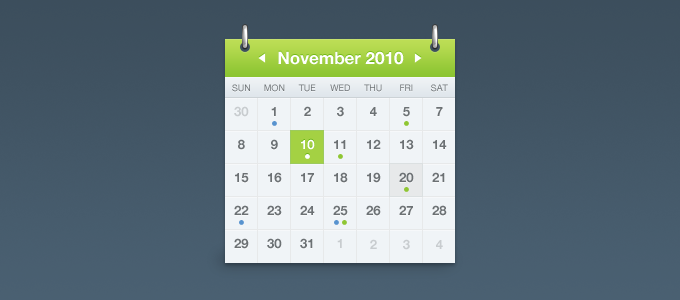
<style>
.page{position:relative;width:680px;height:300px}
.page>*{position:absolute;margin:0}
.t1{font:17px "HelveticaNeue-Bold";color:#ffffff}
.t2{font:9px "HelveticaNeue";color:#6c7174;text-transform:uppercase}
.t3{font:9px "HelveticaNeue";text-transform:uppercase}
.t4{font:13px "HelveticaNeue-Bold";color:#c8cccf}
.t5{font:13px "HelveticaNeue-Bold";color:#6c7174}
.t6{font:13px "HelveticaNeue-Bold";color:#ffffff}
</style>
<div class="page">
<p class="t1" style="left:278px;top:51px;width:126px;height:14px">November 2010</p>
<p class="t2" style="left:232px;top:84px;width:18px;height:8px">Sun</p>
<p class="t2" style="left:264px;top:84px;width:21px;height:8px">Mon</p>
<p class="t2" style="left:298px;top:84px;width:18px;height:8px">Tue</p>
<p class="t2" style="left:330px;top:84px;width:20px;height:7px">Wed</p>
<p class="t2" style="left:364px;top:84px;width:18px;height:8px">Thu</p>
<p class="t3" style="left:400px;top:84px;width:13px;height:7px">Fri</p>
<p class="t3" style="left:431px;top:84px;width:17px;height:8px">Sat</p>
<p class="t4" style="left:234px;top:106px;width:15px;height:11px">30</p>
<p class="t5" style="left:271px;top:107px;width:5px;height:9px">1</p>
<p class="t5" style="left:304px;top:106px;width:7px;height:10px">2</p>
<p class="t5" style="left:337px;top:106px;width:7px;height:11px">3</p>
<p class="t5" style="left:370px;top:107px;width:7px;height:9px">4</p>
<p class="t5" style="left:403px;top:107px;width:7px;height:10px">5</p>
<p class="t5" style="left:436px;top:107px;width:7px;height:9px">7</p>
<p class="t5" style="left:238px;top:139px;width:7px;height:11px">8</p>
<p class="t5" style="left:271px;top:139px;width:7px;height:11px">9</p>
<p class="t6" style="left:301px;top:139px;width:14px;height:11px">10</p>
<p class="t5" style="left:334px;top:140px;width:12px;height:9px">11</p>
<p class="t5" style="left:367px;top:139px;width:14px;height:10px">12</p>
<p class="t5" style="left:400px;top:139px;width:14px;height:11px">13</p>
<p class="t5" style="left:433px;top:140px;width:14px;height:9px">14</p>
<p class="t5" style="left:235px;top:173px;width:14px;height:10px">15</p>
<p class="t5" style="left:268px;top:172px;width:14px;height:11px">16</p>
<p class="t5" style="left:301px;top:173px;width:13px;height:9px">17</p>
<p class="t5" style="left:334px;top:172px;width:14px;height:11px">18</p>
<p class="t5" style="left:367px;top:172px;width:14px;height:11px">19</p>
<p class="t5" style="left:399px;top:172px;width:15px;height:11px">20</p>
<p class="t5" style="left:432px;top:172px;width:13px;height:10px">21</p>
<p class="t5" style="left:234px;top:205px;width:15px;height:10px">22</p>
<p class="t5" style="left:267px;top:205px;width:15px;height:11px">23</p>
<p class="t5" style="left:300px;top:205px;width:15px;height:10px">24</p>
<p class="t5" style="left:333px;top:205px;width:15px;height:11px">25</p>
<p class="t5" style="left:366px;top:205px;width:15px;height:11px">26</p>
<p class="t5" style="left:399px;top:205px;width:14px;height:10px">27</p>
<p class="t5" style="left:432px;top:205px;width:15px;height:11px">28</p>
<p class="t5" style="left:234px;top:238px;width:15px;height:11px">29</p>
<p class="t5" style="left:267px;top:238px;width:15px;height:11px">30</p>
<p class="t5" style="left:300px;top:238px;width:13px;height:11px">31</p>
<p class="t4" style="left:337px;top:239px;width:5px;height:9px">1</p>
<p class="t4" style="left:370px;top:239px;width:7px;height:10px">2</p>
<p class="t4" style="left:403px;top:239px;width:7px;height:11px">3</p>
<p class="t4" style="left:436px;top:240px;width:7px;height:9px">4</p>
</div>
